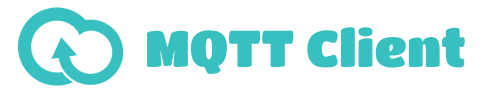
<style>
.page{position:relative;width:500px;height:100px;background:#ffffff}
.page>*{position:absolute;margin:0}
.t1{font:51px "TitanOne";color:#37c0bf}
</style>
<div class="page">
<p class="t1" style="left:147px;top:27px;width:318px;height:47px">MQTT Client</p>
</div>
